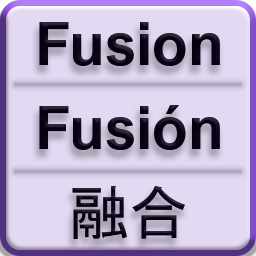
<style>
.page{position:relative;width:256px;height:256px;background:#e4d9f3}
.page>*{position:absolute;margin:0}
.t1{font:60px "ArialNova-Bold";color:#080112}
.t2{font:60px "MS-Gothic";color:#080112}
</style>
<div class="page">
<p class="t1" style="left:39px;top:22px;width:181px;height:44px">Fusion</p>
<p class="t1" style="left:39px;top:105px;width:181px;height:45px">Fusión</p>
<p class="t2" style="left:72px;top:186px;width:113px;height:53px">融合</p>
</div>
